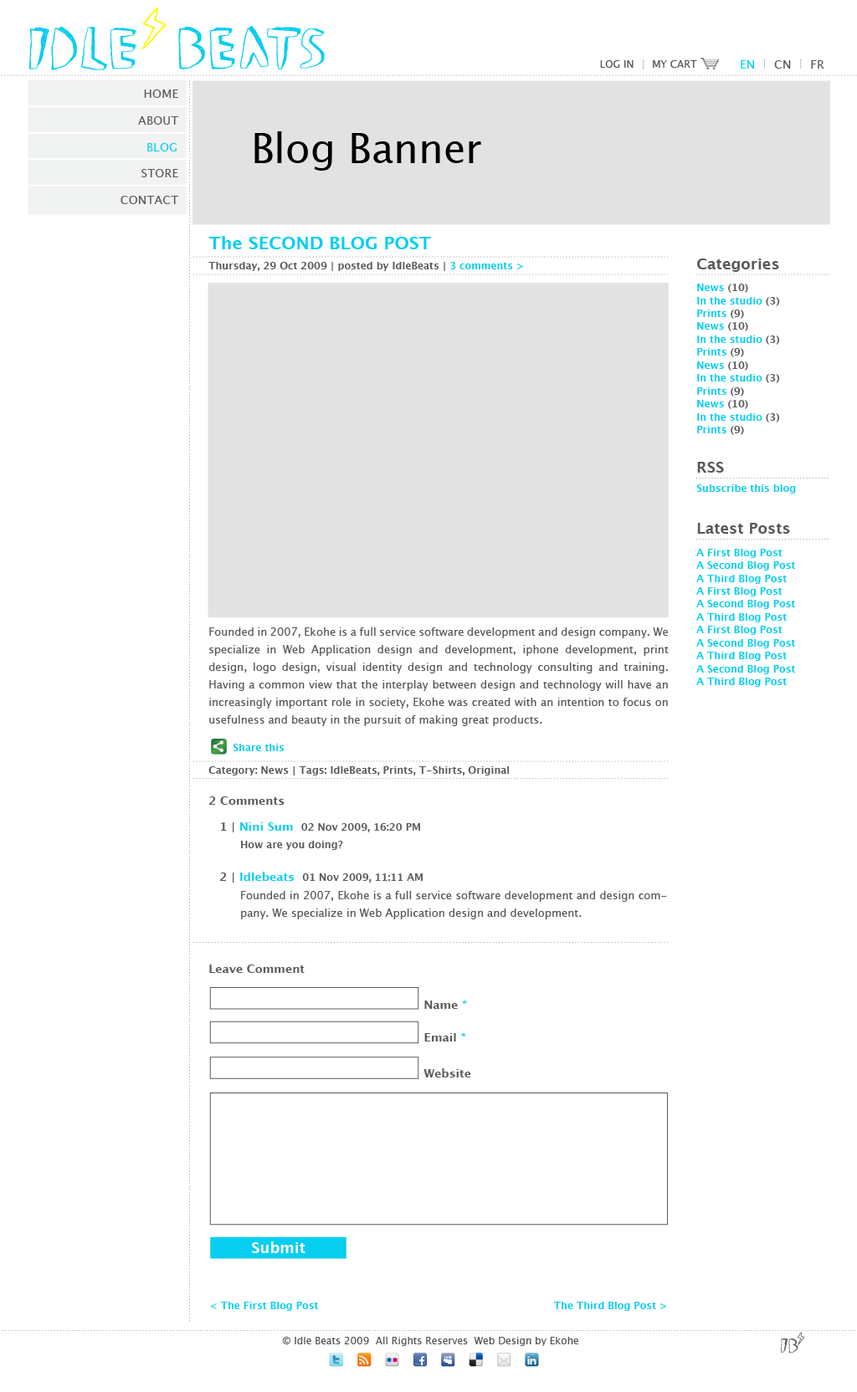
<style>
.page{position:relative;width:857px;height:1392px;background:#ffffff}
.page>*{position:absolute;margin:0}
.t1{font:10px "LucidaGrande";color:#565656}
.t2{font:12px "LucidaGrande";color:#565656}
.t3{font:12px "LucidaGrande";color:#07ceef}
.t4{font:12px "LucidaGrande";color:#595959}
.t5{font:40.2px "LucidaGrande";color:#000000}
.t6{font:17.6px "LucidaGrande-Bold";color:#07ceef}
.t7{font:10px "LucidaGrande-Bold";color:#595959}
.t8{font:10px "LucidaGrande-Bold";color:#07ceef}
.t9{font:15.1px "LucidaGrande-Bold";color:#595959}
.t10{font:10.9px/17.6px "LucidaGrande";color:#595959}
.t11{font:11.7px "LucidaGrande-Bold";color:#595959}
.t12{font:11.7px "LucidaGrande-Bold";color:#07ceef}
.t13{font:15.1px "LucidaGrande-Bold";color:#ffffff}
</style>
<div class="page">
<p class="t1" style="left:600px;top:60px;width:33px;height:8px">LOG IN</p>
<p class="t1" style="left:653px;top:60px;width:44px;height:8px">MY CART</p>
<p class="t2" style="left:740px;top:60px;width:84px;height:9px"><span class="t3">EN</span>     CN     FR</p>
<p class="t4" style="left:144px;top:90px;width:34px;height:8px">HOME</p>
<p class="t4" style="left:138px;top:116px;width:41px;height:9px">ABOUT</p>
<p class="t5" style="left:254px;top:131px;width:227px;height:40px">Blog Banner</p>
<p class="t3" style="left:147px;top:143px;width:30px;height:8px">BLOG</p>
<p class="t4" style="left:141px;top:169px;width:37px;height:8px">STORE</p>
<p class="t4" style="left:120px;top:196px;width:59px;height:8px">CONTACT</p>
<p class="t6" style="left:208px;top:236px;width:223px;height:13px">The SECOND BLOG POST</p>
<p class="t7" style="left:208px;top:262px;width:316px;height:9px">Thursday, 29 Oct 2009 | posted by IdleBeats | <span class="t8">3 comments &gt;</span></p>
<p class="t9" style="left:697px;top:258px;width:82px;height:14px">Categories</p>
<p class="t8" style="left:697px;top:284px;width:51px;height:9px">News<span class="t7"> (10)</span></p>
<p class="t8" style="left:697px;top:297px;width:83px;height:9px">In the studio<span class="t7"> (3)</span></p>
<p class="t8" style="left:697px;top:310px;width:47px;height:9px">Prints<span class="t7"> (9)</span></p>
<p class="t8" style="left:697px;top:322px;width:51px;height:9px">News<span class="t7"> (10)</span></p>
<p class="t8" style="left:697px;top:335px;width:83px;height:10px">In the studio<span class="t7"> (3)</span></p>
<p class="t8" style="left:697px;top:348px;width:47px;height:9px">Prints<span class="t7"> (9)</span></p>
<p class="t8" style="left:697px;top:361px;width:51px;height:10px">News<span class="t7"> (10)</span></p>
<p class="t8" style="left:697px;top:374px;width:83px;height:9px">In the studio<span class="t7"> (3)</span></p>
<p class="t8" style="left:697px;top:387px;width:47px;height:10px">Prints<span class="t7"> (9)</span></p>
<p class="t8" style="left:697px;top:400px;width:51px;height:9px">News<span class="t7"> (10)</span></p>
<p class="t8" style="left:697px;top:413px;width:83px;height:9px">In the studio<span class="t7"> (3)</span></p>
<p class="t8" style="left:697px;top:426px;width:47px;height:9px">Prints<span class="t7"> (9)</span></p>
<p class="t9" style="left:697px;top:462px;width:27px;height:11px">RSS</p>
<p class="t8" style="left:696px;top:484px;width:100px;height:10px">Subscribe this blog</p>
<p class="t9" style="left:697px;top:523px;width:93px;height:11px">Latest Posts</p>
<p class="t8" style="left:696px;top:549px;width:86px;height:9px">A First Blog Post</p>
<p class="t8" style="left:696px;top:561px;width:99px;height:10px">A Second Blog Post</p>
<p class="t8" style="left:696px;top:575px;width:90px;height:9px">A Third Blog Post</p>
<p class="t8" style="left:696px;top:587px;width:86px;height:9px">A First Blog Post</p>
<p class="t8" style="left:696px;top:600px;width:99px;height:9px">A Second Blog Post</p>
<p class="t8" style="left:696px;top:613px;width:90px;height:9px">A Third Blog Post</p>
<p class="t10" style="left:208px;top:627px;width:460px;height:99px;text-align:justify">Founded in 2007, Ekohe is a full service software development and design company. We specialize in Web Application design and development, iphone development, print design, logo design, visual identity design and technology consulting and training. Having a common view that the interplay between design and technology will have an increasingly important role in society, Ekohe was created with an intention to focus on usefulness and beauty in the pursuit of making great products.</p>
<p class="t8" style="left:696px;top:626px;width:86px;height:9px">A First Blog Post</p>
<p class="t8" style="left:696px;top:639px;width:99px;height:9px">A Second Blog Post</p>
<p class="t8" style="left:696px;top:652px;width:90px;height:9px">A Third Blog Post</p>
<p class="t8" style="left:696px;top:665px;width:99px;height:9px">A Second Blog Post</p>
<p class="t8" style="left:696px;top:678px;width:90px;height:9px">A Third Blog Post</p>
<p class="t8" style="left:233px;top:744px;width:51px;height:7px">Share this</p>
<p class="t7" style="left:208px;top:766px;width:301px;height:9px">Category: News | Tags: IdleBeats, Prints, T-Shirts, Original</p>
<p class="t11" style="left:209px;top:796px;width:75px;height:9px">2 Comments</p>
<p class="t7" style="left:221px;top:822px;width:199px;height:10px"><span class="t11">1 | </span><span class="t12">Nini Sum  </span>02 Nov 2009, 16:20 PM</p>
<p class="t7" style="left:241px;top:841px;width:102px;height:9px">How are you doing?</p>
<p class="t7" style="left:220px;top:872px;width:202px;height:11px"><span class="t11">2 | </span><span class="t12">Idlebeats  </span>01 Nov 2009, 11:11 AM</p>
<p class="t10" style="left:241px;top:891px;width:426px;height:28px;text-align:justify">Founded in 2007, Ekohe is a full service software development and design company. We specialize in Web Application design and development.</p>
<p class="t11" style="left:209px;top:965px;width:96px;height:8px">Leave Comment</p>
<p class="t11" style="left:424px;top:1001px;width:43px;height:8px">Name<span class="t12"> *</span></p>
<p class="t11" style="left:424px;top:1033px;width:42px;height:9px">Email<span class="t12"> *</span></p>
<p class="t11" style="left:423px;top:1068px;width:48px;height:9px">Website</p>
<p class="t13" style="left:252px;top:1241px;width:53px;height:12px">Submit</p>
<p class="t8" style="left:210px;top:1302px;width:108px;height:9px">&lt; The First Blog Post</p>
<p class="t8" style="left:553px;top:1302px;width:114px;height:9px">The Third Blog Post &gt;</p>
<p class="t1" style="left:282px;top:1337px;width:296px;height:9px">© Idle Beats 2009  All Rights Reserves  Web Design by Ekohe</p>
</div>
